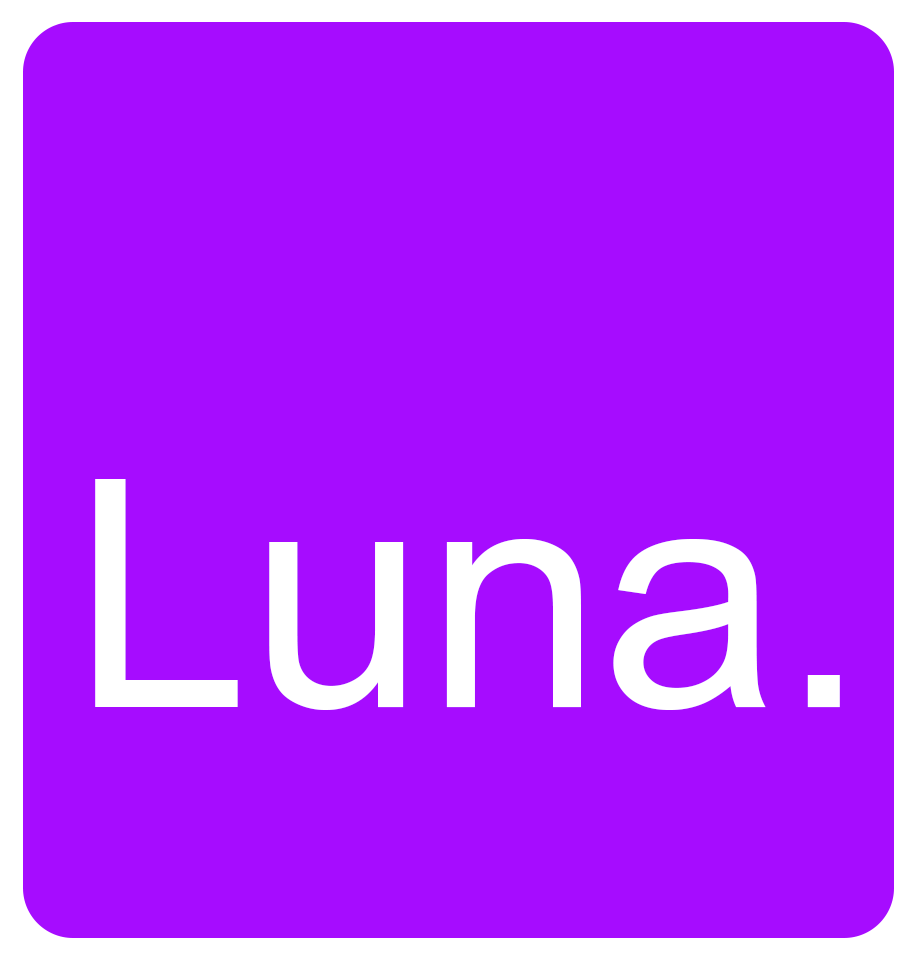
<style>
.page{position:relative;width:922px;height:958px;background:#a60cff}
.page>*{position:absolute;margin:0}
.t1{font:317.5px "ArialMT";color:#ffffff}
</style>
<div class="page">
<p class="t1" style="left:95px;top:479px;width:745px;height:231px">Luna.</p>
</div>
